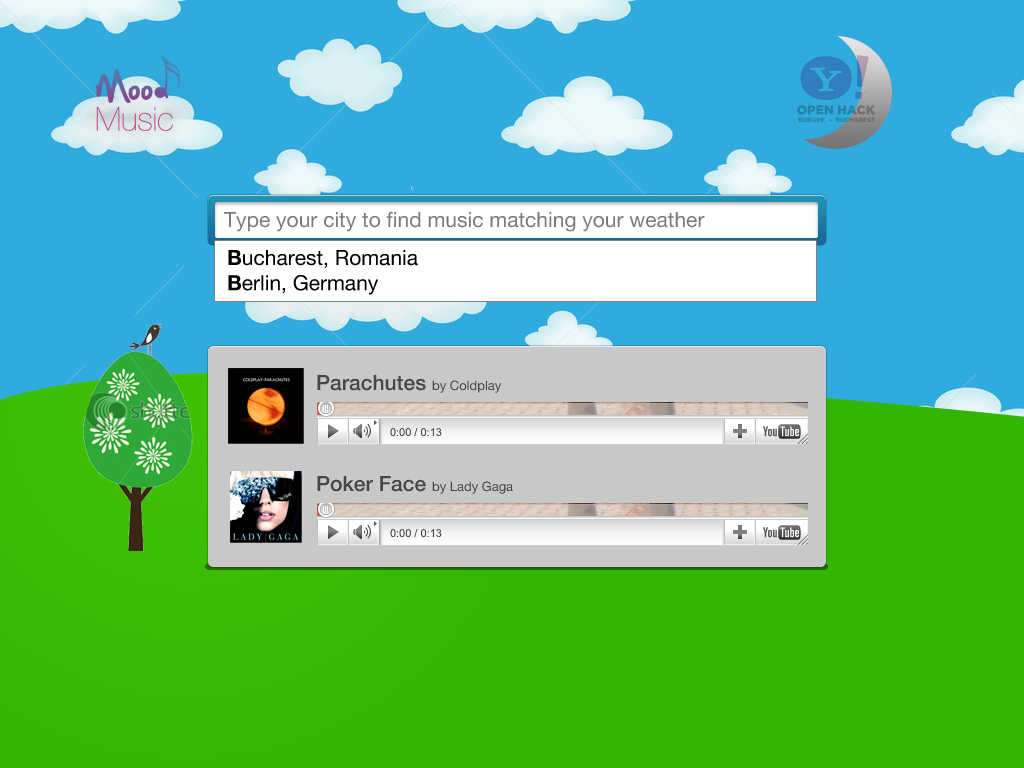
<style>
.page{position:relative;width:1024px;height:768px;background:#31abde}
.page>*{position:absolute;margin:0}
.t1{font:21px "HelveticaNeue";color:#7b7b7b}
.t2{font:21px "HelveticaNeue";color:#000000}
.t3{font:21px "HelveticaNeue-Bold";color:#000000}
.t4{font:13px "HelveticaNeue";color:#464646}
.t5{font:21px "HelveticaNeue-Medium";color:#464646}
</style>
<div class="page">
<p class="t1" style="left:224px;top:211px;width:481px;height:21px">Type your city to find music matching your weather</p>
<p class="t2" style="left:228px;top:250px;width:190px;height:45px"><span class="t3">B</span>ucharest, Romania<br><span class="t3">B</span>erlin, Germany</p>
<p class="t4" style="left:317px;top:375px;width:185px;height:18px"><span class="t5">Parachutes </span>by Coldplay</p>
<p class="t4" style="left:317px;top:476px;width:196px;height:18px"><span class="t5">Poker Face </span>by Lady Gaga</p>
</div>
